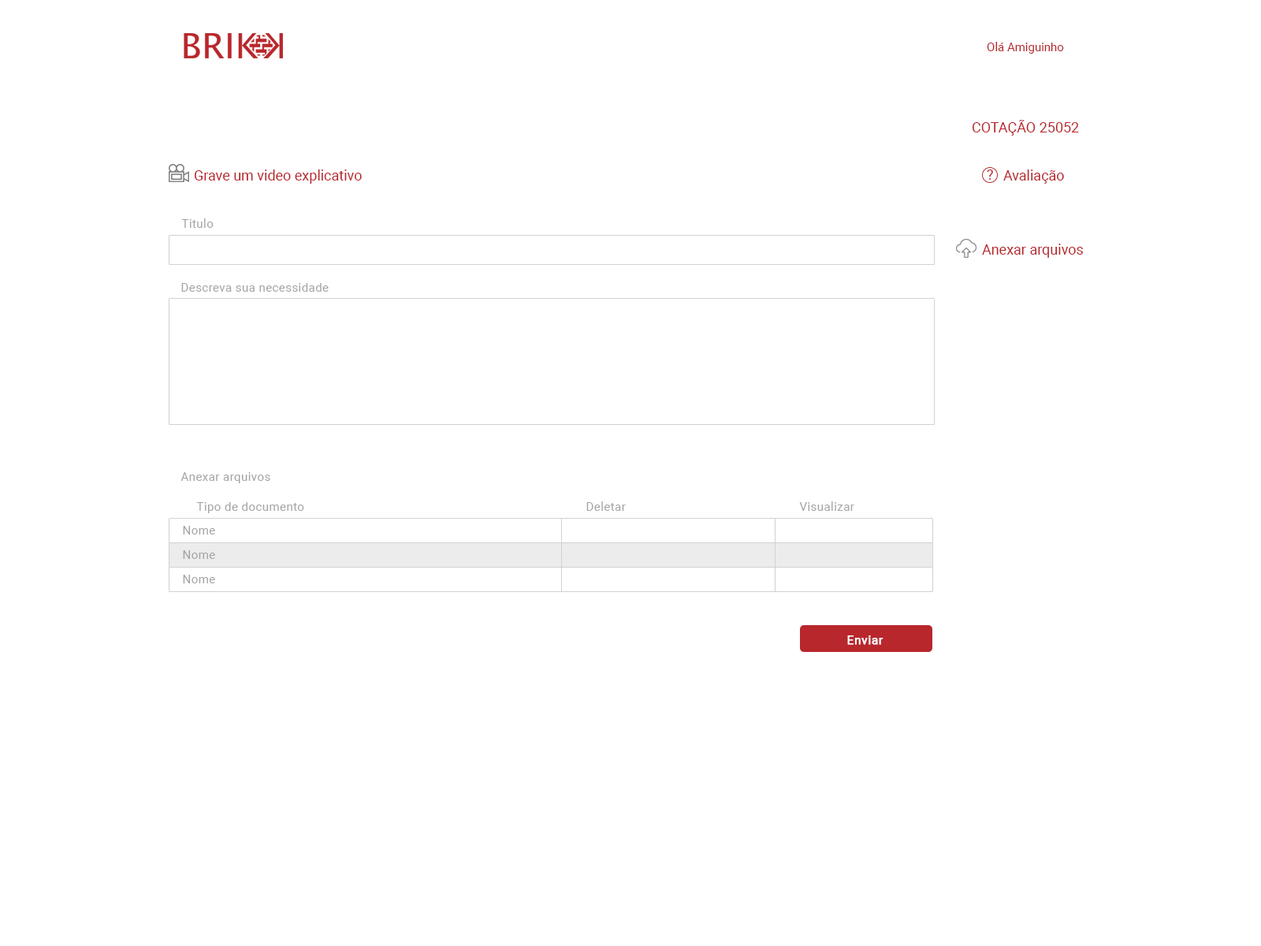
<style>
.page{position:relative;width:1261px;height:946px;background:#ffffff}
.page>*{position:absolute;margin:0}
.t1{font:11.8px "Roboto-Regular";color:#b8272c}
.t2{font:14.2px "Roboto-Regular";color:#b8272c}
.t3{font:11.8px "Roboto-Regular";letter-spacing:0.03em;color:#a4a4a4}
.t4{font:11.8px "Roboto-Regular";letter-spacing:0.03em;color:#ffffff;font-weight:bold}
</style>
<div class="page">
<p class="t1" style="left:987px;top:42px;width:77px;height:12px">Olá Amiguinho</p>
<p class="t2" style="left:972px;top:120px;width:107px;height:16px">COTAÇÃO 25052</p>
<p class="t2" style="left:195px;top:169px;width:167px;height:15px">Grave um video explicativo</p>
<p class="t2" style="left:987px;top:169px;width:6px;height:11px">?</p>
<p class="t2" style="left:1003px;top:169px;width:61px;height:15px">Avaliação</p>
<p class="t3" style="left:181px;top:218px;width:33px;height:10px">Titulo</p>
<p class="t2" style="left:982px;top:244px;width:101px;height:14px">Anexar arquivos</p>
<p class="t3" style="left:181px;top:283px;width:148px;height:9px">Descreva sua necessidade</p>
<p class="t3" style="left:180px;top:472px;width:90px;height:11px">Anexar arquivos</p>
<p class="t3" style="left:196px;top:502px;width:108px;height:11px">Tipo de documento</p>
<p class="t3" style="left:586px;top:501px;width:40px;height:10px">Deletar</p>
<p class="t3" style="left:799px;top:501px;width:55px;height:10px">Visualizar</p>
<p class="t3" style="left:183px;top:526px;width:32px;height:8px">Nome</p>
<p class="t3" style="left:183px;top:550px;width:32px;height:9px">Nome</p>
<p class="t3" style="left:183px;top:575px;width:32px;height:8px">Nome</p>
<p class="t4" style="left:847px;top:635px;width:36px;height:10px">Enviar</p>
</div>
